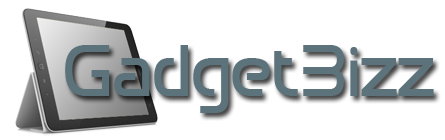
<style>
.page{position:relative;width:445px;height:140px;background:#ffffff}
.page>*{position:absolute;margin:0}
.t1{font:72px "DroidLogo";letter-spacing:-0.08em;color:#5c737c}
</style>
<div class="page">
<p class="t1" style="left:65px;top:45px;width:369px;height:68px">GadgetBizz</p>
</div>
